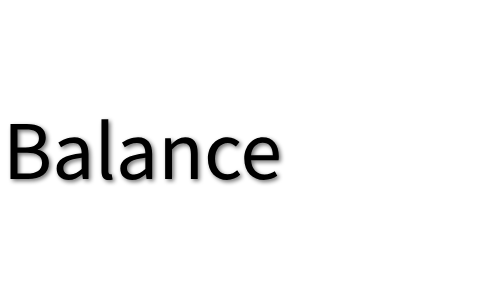
<style>
.page{position:relative;width:500px;height:300px;background:#ffffff}
.page>*{position:absolute;margin:0}
.t1{font:75px "NotoSansKR-Regular";color:#000000}
</style>
<div class="page">
<p class="t1" style="left:10px;top:119px;width:269px;height:61px">Balance</p>
</div>
